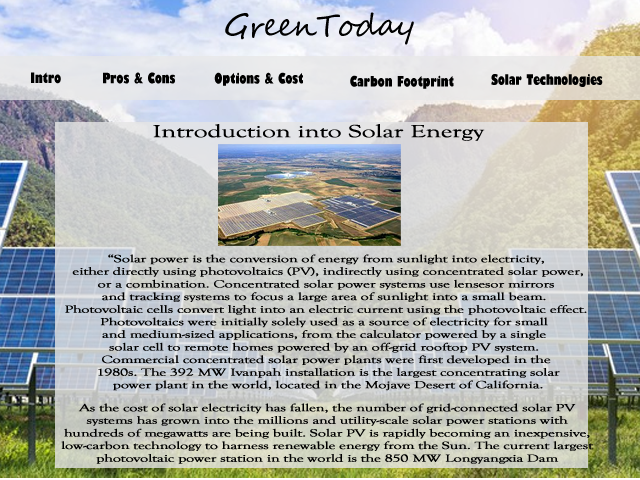
<style>
.page{position:relative;width:640px;height:480px}
.page>*{position:absolute;margin:0}
.t1{font:14px "GillSans-UltraBoldCondensed";color:#000000}
.t2{font:18px "GoudyOldStyleT-Regular";letter-spacing:-0.025em;color:#000000;font-weight:bold;scale:1.5 1}
.t3{font:10.5px "GoudyOldStyleT-Regular";letter-spacing:-0.025em;color:#000000;font-weight:bold;scale:1.5 1}
</style>
<div class="page">
<p class="t1" style="left:31px;top:72px;width:30px;height:12px">Intro</p>
<p class="t1" style="left:103px;top:72px;width:72px;height:12px">Pros &amp; Cons</p>
<p class="t1" style="left:214px;top:72px;width:89px;height:14px">Options &amp; Cost</p>
<p class="t1" style="left:350px;top:75px;width:104px;height:14px">Carbon Footprint</p>
<p class="t1" style="left:491px;top:74px;width:112px;height:13px">Solar Technologies</p>
<p class="t2" style="left:153px;top:124px;width:332px;height:17px">Introduction into Solar Energy</p>
<p class="t3" style="left:65px;top:254px;width:522px;height:137px;text-align:center">“Solar power is the conversion of energy from sunlight into electricity,<br> either directly using photovoltaics (PV), indirectly using concentrated solar power,<br> or a combination. Concentrated solar power systems use lensesor mirrors <br>and tracking systems to focus a large area of sunlight into a small beam. <br>Photovoltaic cells convert light into an electric current using the photovoltaic effect.<br>Photovoltaics were initially solely used as a source of electricity for small <br>and medium-sized applications, from the calculator powered by a single <br>solar cell to remote homes powered by an off-grid rooftop PV system. <br>Commercial concentrated solar power plants were first developed in the<br> 1980s. The 392 MW Ivanpah installation is the largest concentrating solar<br> power plant in the world, located in the Mojave Desert of California.</p>
<p class="t3" style="left:61px;top:403px;width:533px;height:61px;text-align:center">As the cost of solar electricity has fallen, the number of grid-connected solar PV <br>systems has grown into the millions and utility-scale solar power stations with <br>hundreds of megawatts are being built. Solar PV is rapidly becoming an inexpensive, <br>low-carbon technology to harness renewable energy from the Sun. The current largest <br>photovoltaic power station in the world is the 850 MW Longyangxia Dam</p>
</div>
